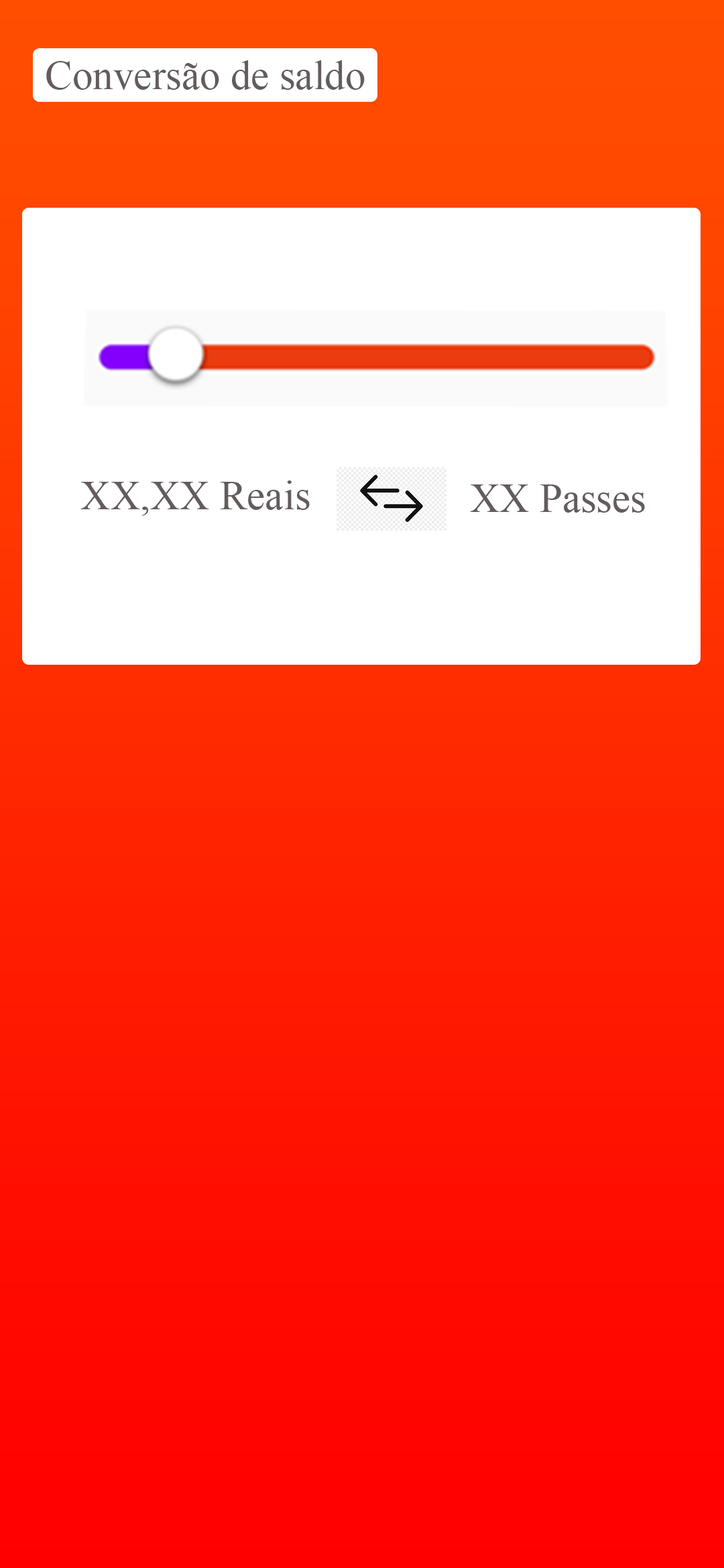
<style>
.page{position:relative;width:724px;height:1568px;background:#ffffff}
.page>*{position:absolute;margin:0}
.t1{font:40.9px "TimesNewRomanPSMT";color:#645c5c}
</style>
<div class="page">
<p class="t1" style="left:46px;top:60px;width:319px;height:30px">Conversão de saldo</p>
<p class="t1" style="left:80px;top:480px;width:230px;height:36px">XX,XX Reais</p>
</div>
